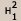
<style>
.page{position:relative;width:21px;height:21px;background:#d9cdc1}
.page>*{position:absolute;margin:0}
.t1{font:9px "Tahoma";color:#000000}
</style>
<div class="page">
<p class="t1" style="left:12px;top:1px;width:5px;height:7px">2</p>
<p class="t1" style="left:5px;top:7px;width:6px;height:7px">H</p>
<p class="t1" style="left:12px;top:13px;width:5px;height:7px">1</p>
</div>
